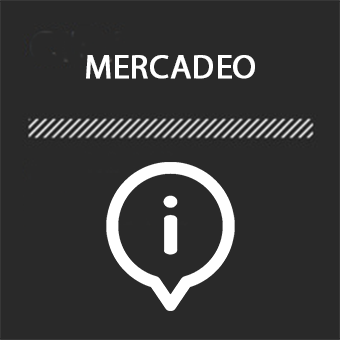
<style>
.page{position:relative;width:340px;height:340px;background:#292929}
.page>*{position:absolute;margin:0}
.t1{font:34px "MyriadPro-Regular";color:#ffffff;font-weight:bold}
</style>
<div class="page">
<p class="t1" style="left:86px;top:55px;width:169px;height:24px">MERCADEO</p>
</div>
